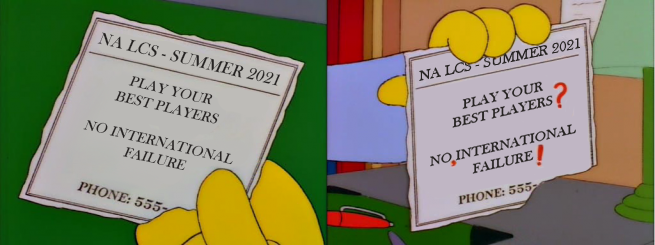
<style>
.page{position:relative;width:655px;height:245px}
.page>*{position:absolute;margin:0}
.t1{font:17px "BaskOldFace";letter-spacing:0.01em;color:#262322;font-style:italic}
.t2{font:14.6px "BaskOldFace";letter-spacing:0.01em;color:#262322;font-style:italic}
</style>
<div class="page">
<p class="t1" style="left:97px;top:32px;width:184px;height:54px;rotate:13deg">NA LCS - SUMMER 2021</p>
<p class="t2" style="left:83px;top:76px;width:150px;height:94px;text-align:center;rotate:13deg">PLAY YOUR<br>BEST PLAYERS<br><br>NO INTERNATIONAL <br>FAILURE</p>
</div>
